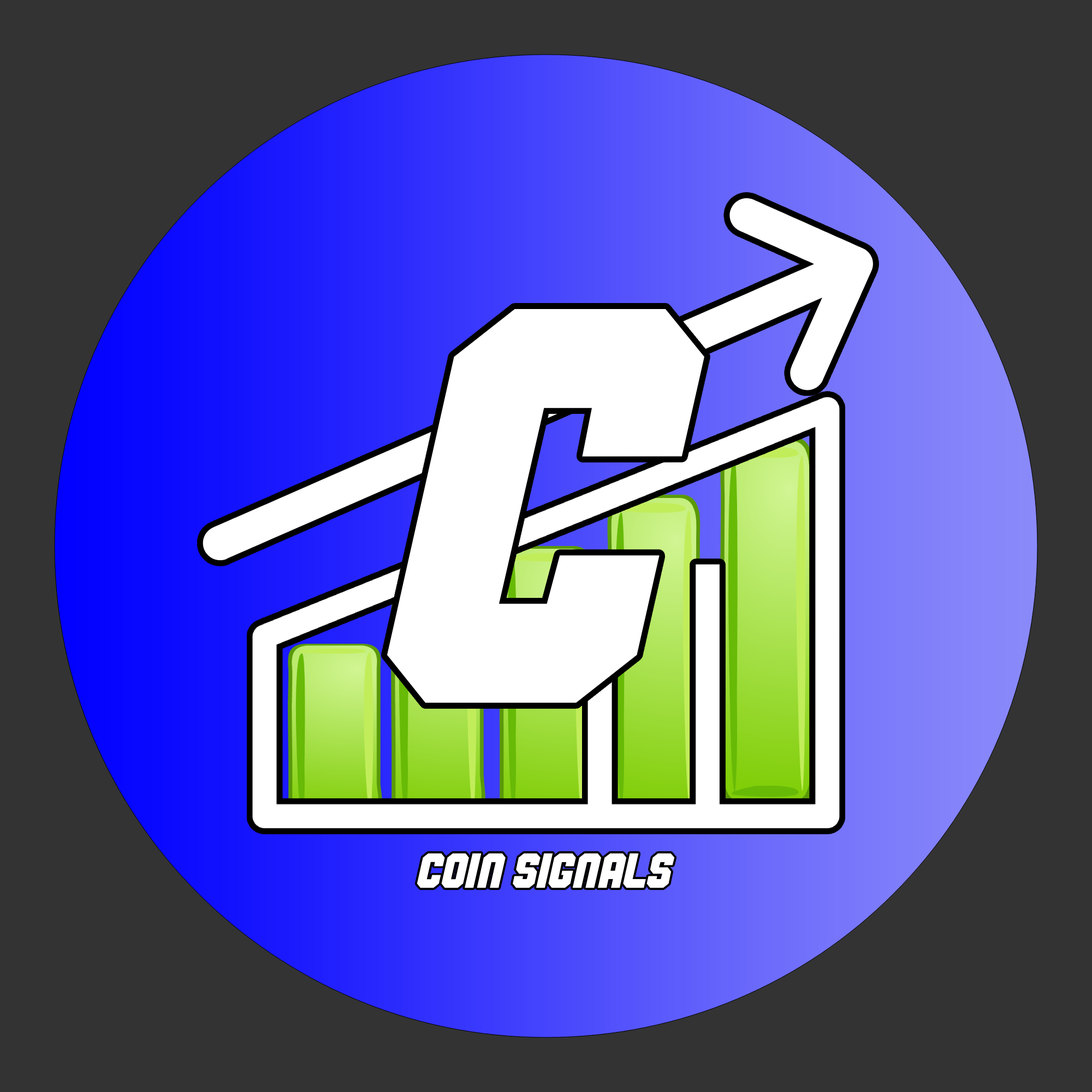
<style>
.page{position:relative;width:1092px;height:1092px;background:#333333}
.page>*{position:absolute;margin:0}
.t1{font:562.5px "Commando";color:#ffffff}
.t2{font:49.1px "Commando";color:#ffffff}
</style>
<div class="page">
<p class="t1" style="left:387px;top:308px;width:317px;height:395px">C</p>
<p class="t2" style="left:417px;top:853px;width:258px;height:35px">Coin signals</p>
</div>
